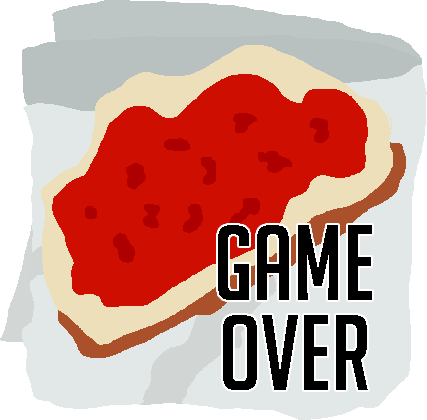
<style>
.page{position:relative;width:427px;height:420px;background:#ce0e00}
.page>*{position:absolute;margin:0}
.t1{font:104px/90px "BigNoodleTitling";color:#000000}
</style>
<div class="page">
<p class="t1" style="left:218px;top:225px;width:154px;height:165px;text-align:center">Game<br>Over</p>
</div>
